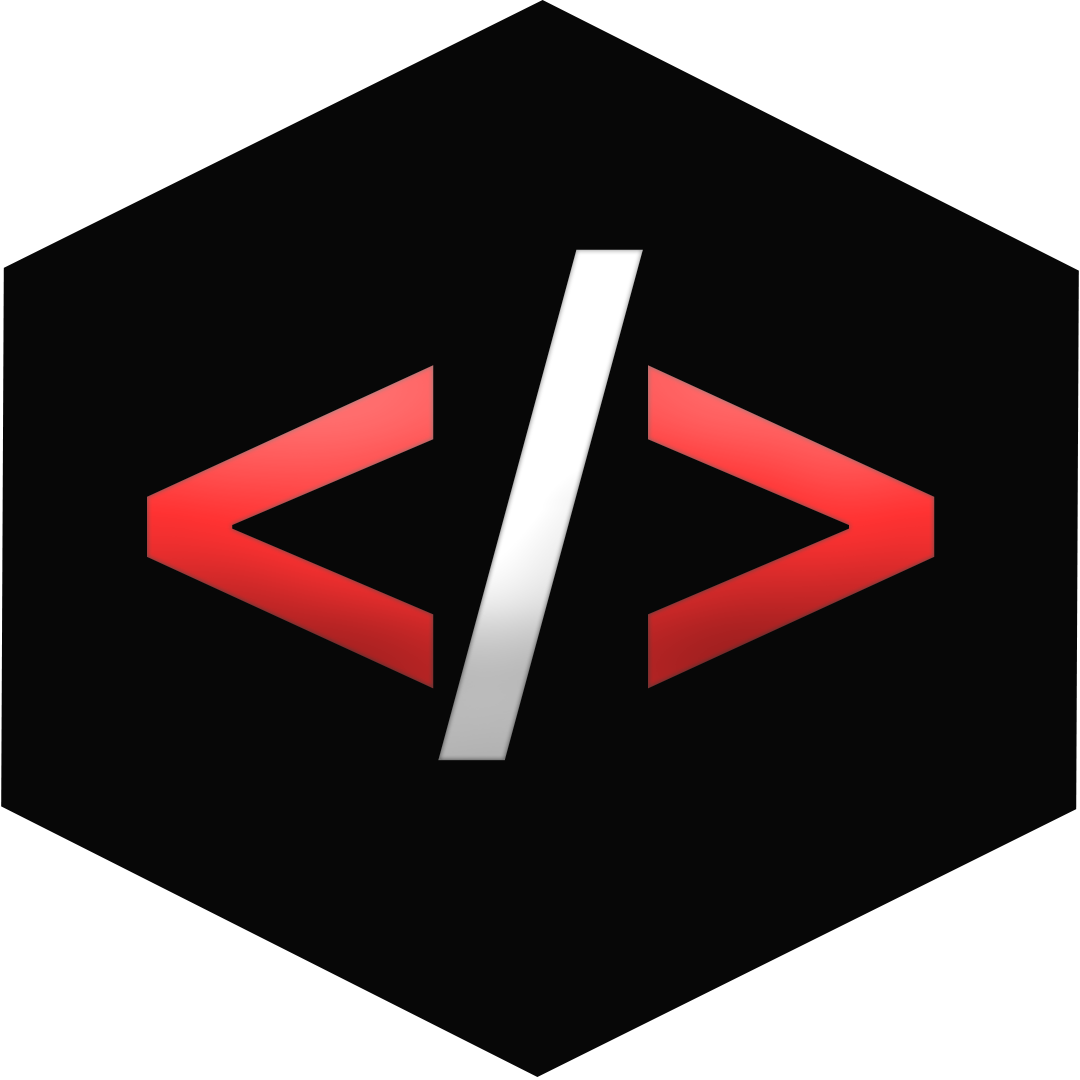
<style>
.page{position:relative;width:1080px;height:1080px;background:#070707}
.page>*{position:absolute;margin:0}
.t1{font:585.6px "Inter-SemiBold";letter-spacing:-0.1em}
</style>
<div class="page">
<p class="t1" style="left:147px;top:249px;width:788px;height:512px">&lt;/&gt;</p>
</div>
